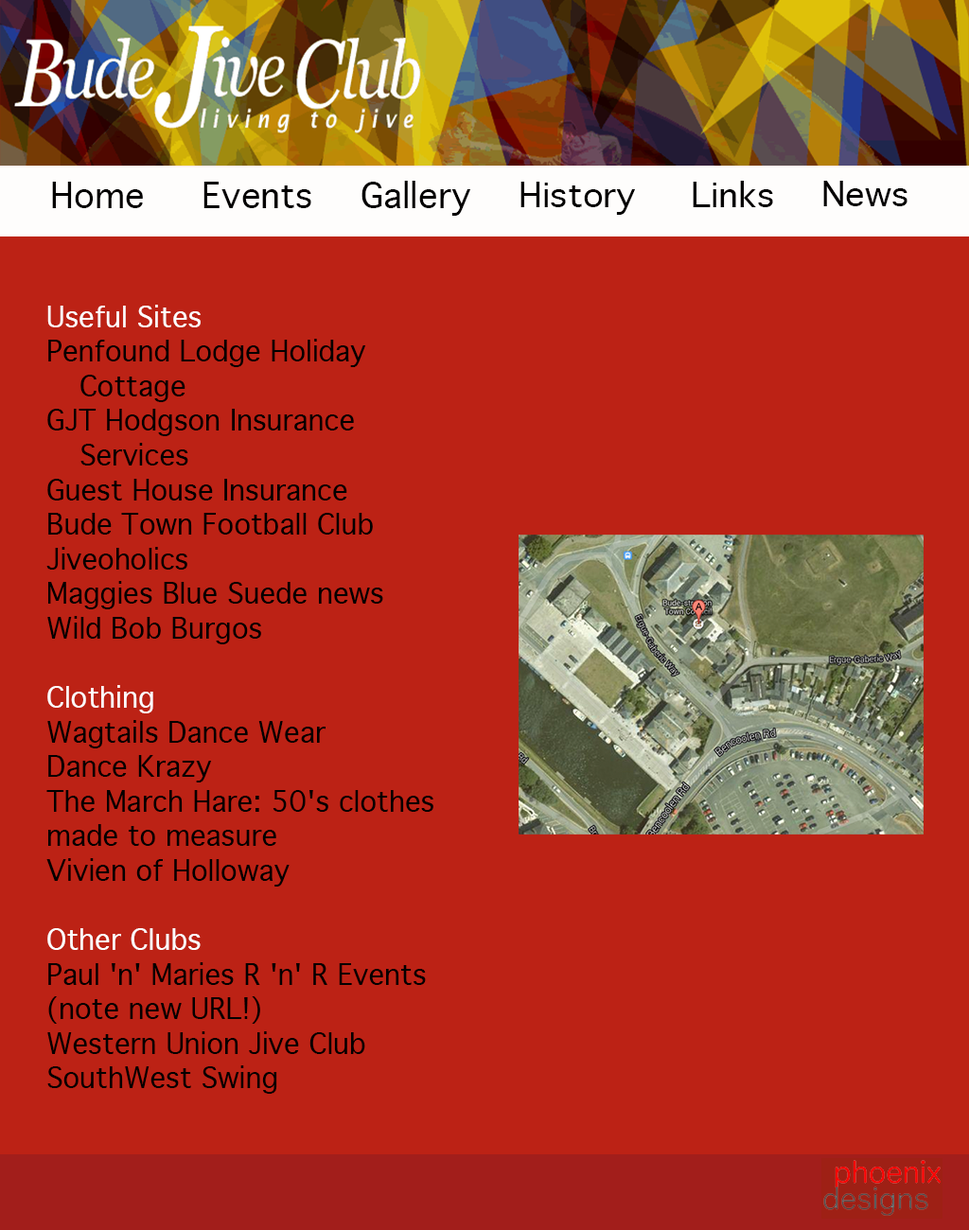
<style>
.page{position:relative;width:969px;height:1230px;background:#bc2215}
.page>*{position:absolute;margin:0}
.t1{font:33.9px "Geneva";color:#020000}
.t2{font:32.8px "Geneva";color:#020000;scale:1.04 1}
.t3{font:28.9px "Geneva";color:#010000;scale:0.95 1}
.t4{font:28.9px "Geneva";color:#fffdfd;scale:0.95 1}
.t5{font:28.9px "Geneva";color:#fefcfc;scale:0.95 1}
.t6{font:28.9px "Geneva";color:#fdfdfd;scale:0.95 1}
.t7{font:28.9px "Geneva";color:#030000;scale:0.95 1}
</style>
<div class="page">
<p class="t1" style="left:52px;top:182px;width:91px;height:26px">Home</p>
<p class="t1" style="left:203px;top:182px;width:108px;height:26px">Events</p>
<p class="t1" style="left:362px;top:181px;width:108px;height:35px">Gallery</p>
<p class="t2" style="left:521px;top:182px;width:114px;height:33px">History</p>
<p class="t2" style="left:693px;top:181px;width:80px;height:26px">Links</p>
<p class="t2" style="left:823px;top:181px;width:85px;height:25px">News</p>
<p class="t3" style="left:46px;top:305px;width:387px;height:789px"><span class="t4">Useful Sites<br></span>Penfound Lodge Holiday <br> Cottage<br>GJT Hodgson Insurance <br> Services<br>Guest House Insurance<br>Bude Town Football Club<br>Jiveoholics<br>Maggies Blue Suede news<br>Wild Bob Burgos<br><br><span class="t5">Clothing<br></span>Wagtails Dance Wear<br>Dance Krazy<br>The March Hare: 50's clothes made to measure<br>Vivien of Holloway<br><br><span class="t6">Other Clubs<br></span><span class="t7">Paul 'n' Maries R 'n' R Events (note new URL!)<br>Western Union Jive Club<br>SouthWest Swing</span></p>
</div>
